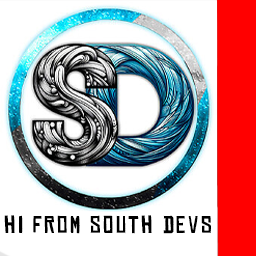
<style>
.page{position:relative;width:256px;height:256px;background:#ffffff}
.page>*{position:absolute;margin:0}
.t1{font:23px "ChineseRocksRg-Regular";letter-spacing:0.1em;color:#000000}
</style>
<div class="page">
<p class="t1" style="left:4px;top:215px;width:207px;height:19px">hi from south devs</p>
</div>
